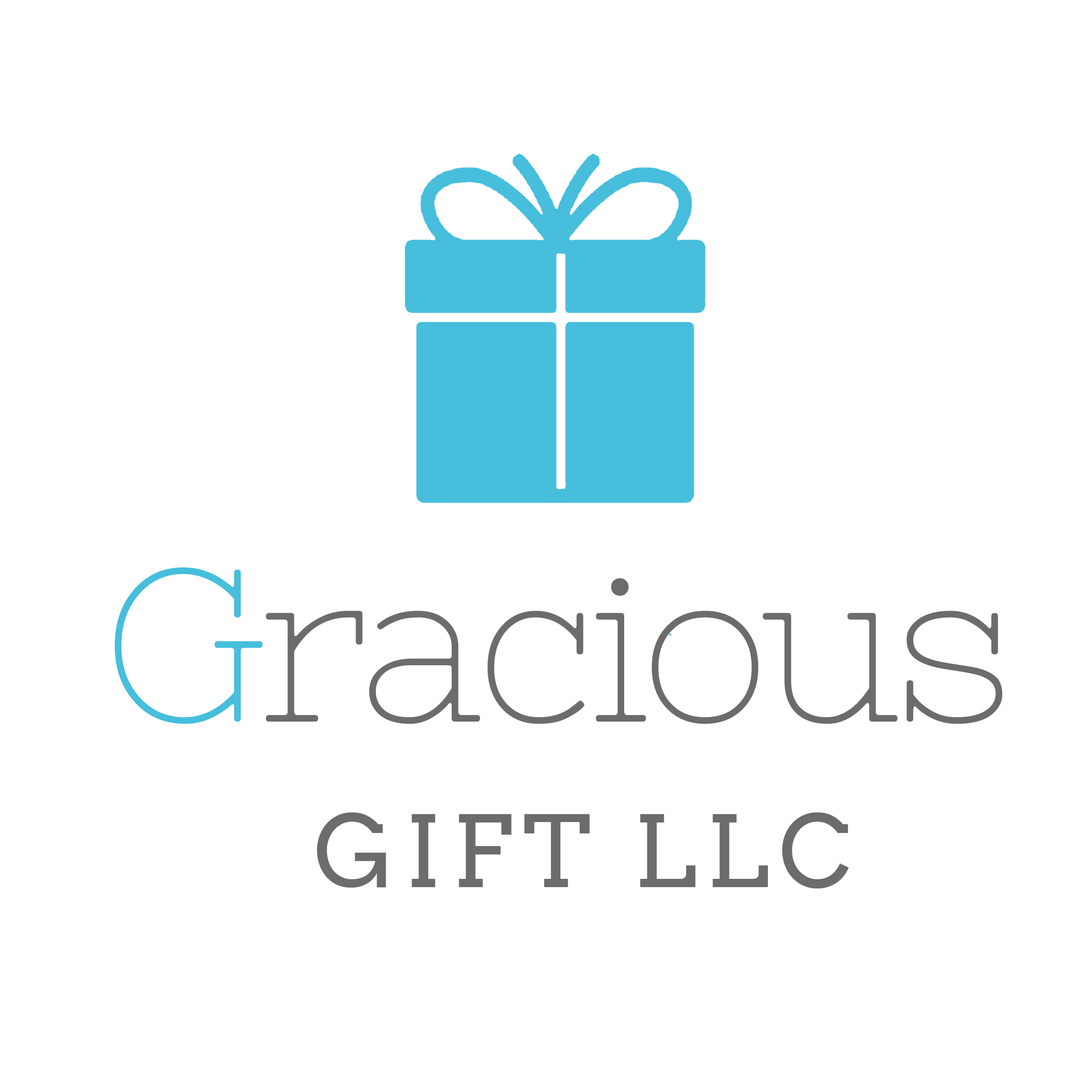
<style>
.page{position:relative;width:1092px;height:1092px;background:#ffffff}
.page>*{position:absolute;margin:0}
.t1{font:217px "NixieOne-Regular";letter-spacing:-0.036em;color:#6c6c6c}
.t2{font:217px "NixieOne-Regular";letter-spacing:-0.036em;color:#46bedc}
.t3{font:98.6px "Arvo";letter-spacing:0.104em;color:#6c6c6c}
</style>
<div class="page">
<p class="t1" style="left:114px;top:567px;width:888px;height:157px"><span class="t2">G</span>racious</p>
<p class="t3" style="left:317px;top:812px;width:532px;height:76px">GIFT LLC</p>
</div>
